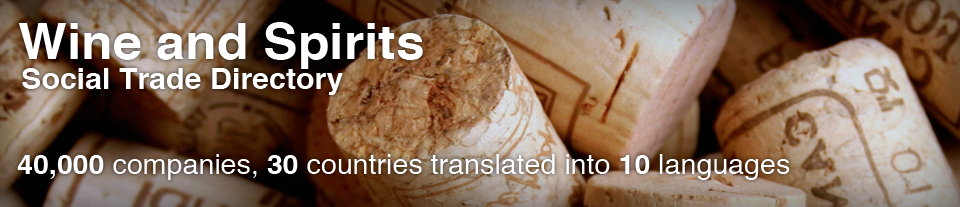
<style>
.page{position:relative;width:960px;height:207px}
.page>*{position:absolute;margin:0}
.t1{font:49px "Helvetica-Bold";color:#ffffff;scale:1.06 1}
.t2{font:28.6px "Helvetica-Bold";color:#ffffff;scale:1.06 1}
.t3{font:27px "Helvetica";color:#ffffff;scale:1.06 1}
.t4{font:27px "Helvetica-Bold";color:#ffffff;scale:1.06 1}
</style>
<div class="page">
<p class="t1" style="left:18px;top:22px;width:405px;height:47px">Wine and Spirits</p>
<p class="t2" style="left:22px;top:68px;width:321px;height:27px">Social Trade Directory</p>
<p class="t3" style="left:17px;top:154px;width:773px;height:26px"><span class="t4">40,000</span> companies, <span class="t4">30</span> countries translated into <span class="t4">10 </span>languages</p>
</div>
